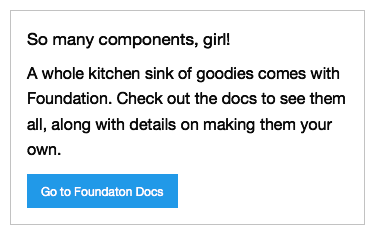
<style>
.page{position:relative;width:375px;height:235px;background:#ffffff}
.page>*{position:absolute;margin:0}
.t1{font:12px "MyriadPro-Regular";color:#000000}
.t2{font:12px "HelveticaNeue";color:#ffffff}
</style>
<div class="page">
<p class="t1" style="left:26px;top:32px;width:319px;height:124px">So many components, girl!<br>A whole kitchen sink of goodies comes with Foundation. Check out the docs to see them all, along with details on making them your own.</p>
<p class="t2" style="left:41px;top:186px;width:123px;height:11px">Go to Foundaton Docs</p>
</div>
